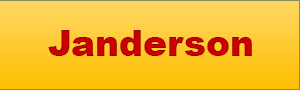
<style>
.page{position:relative;width:300px;height:90px}
.page>*{position:absolute;margin:0}
.t1{font:36px "Arial-Black";color:#cc0000}
</style>
<div class="page">
<p class="t1" style="left:48px;top:30px;width:204px;height:26px">Janderson</p>
</div>
